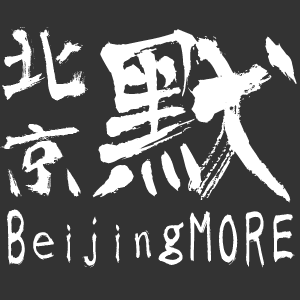
<style>
.page{position:relative;width:300px;height:300px;background:#333333}
.page>*{position:absolute;margin:0}
.t1{font:96px "AjiwaiPro";color:#ffffff}
.t2{font:221.3px "AjiwaiPro";color:#ffffff}
.t3{font:64px "AjiwaiPro";color:#ffffff}
</style>
<div class="page">
<p class="t1" style="left:2px;top:27px;width:86px;height:74px">北</p>
<p class="t2" style="left:92px;top:29px;width:205px;height:174px">默</p>
<p class="t1" style="left:0px;top:124px;width:81px;height:73px">京</p>
<p class="t3" style="left:7px;top:209px;width:288px;height:59px">BeijingMORE</p>
</div>
